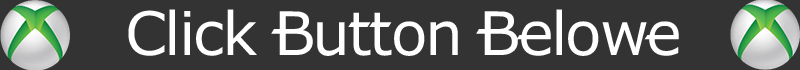
<style>
.page{position:relative;width:800px;height:70px;background:#333333}
.page>*{position:absolute;margin:0}
.t1{font:60px "XBOX360";letter-spacing:-0.038em;color:#ffffff}
</style>
<div class="page">
<p class="t1" style="left:128px;top:9px;width:551px;height:47px">Click Button Belowe</p>
</div>
